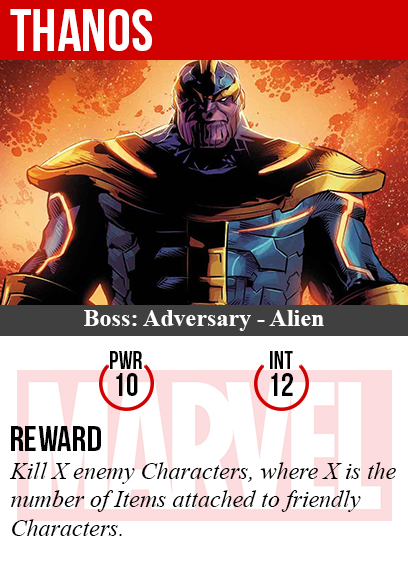
<style>
.page{position:relative;width:408px;height:585px;background:#ffffff}
.page>*{position:absolute;margin:0}
.t1{font:60px "BebasNeue";color:#ffffff}
.t2{font:24px "TimesNewRomanPS-BoldMT";color:#ffffff}
.t3{font:25px "BebasNeue";color:#000000}
.t4{font:32px "BebasNeue";color:#000000}
.t5{font:36px "BebasNeue";color:#000000}
.t6{font:24px "TimesNewRomanPS-ItalicMT";color:#000000}
</style>
<div class="page">
<p class="t1" style="left:10px;top:9px;width:142px;height:42px">thanos</p>
<p class="t2" style="left:84px;top:310px;width:240px;height:21px">Boss: Adversary - Alien</p>
<p class="t3" style="left:110px;top:351px;width:32px;height:18px">PWR</p>
<p class="t3" style="left:270px;top:351px;width:23px;height:18px">int</p>
<p class="t4" style="left:116px;top:373px;width:22px;height:23px">10</p>
<p class="t4" style="left:271px;top:373px;width:22px;height:23px">12</p>
<p class="t5" style="left:11px;top:426px;width:90px;height:25px">reward</p>
<p class="t6" style="left:9px;top:462px;width:387px;height:74px">Kill X enemy Characters, where X is the<br>number of Items attached to friendly<br>Characters.</p>
</div>
